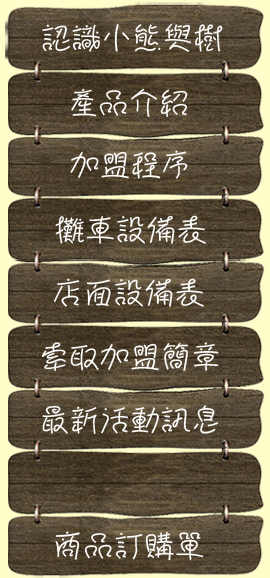
<style>
.page{position:relative;width:270px;height:578px}
.page>*{position:absolute;margin:0}
.t1{font:30.5px "DFLianLian-W4-HK-BF";color:#fdfdfc}
</style>
<div class="page">
<p class="t1" style="left:42px;top:23px;width:181px;height:29px">認識小熊與樹</p>
<p class="t1" style="left:71px;top:88px;width:117px;height:29px">產品介紹</p>
<p class="t1" style="left:70px;top:150px;width:118px;height:29px">加盟程序</p>
<p class="t1" style="left:55px;top:215px;width:151px;height:29px">攤車設備表</p>
<p class="t1" style="left:54px;top:278px;width:150px;height:29px">店面設備表</p>
<p class="t1" style="left:42px;top:342px;width:177px;height:29px">索取加盟簡章</p>
<p class="t1" style="left:42px;top:405px;width:177px;height:29px">最新活動訊息</p>
<p class="t1" style="left:55px;top:531px;width:149px;height:30px">商品訂購單</p>
</div>
